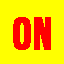
<style>
.page{position:relative;width:64px;height:64px;background:#ffff00}
.page>*{position:absolute;margin:0}
.t1{font:44.9px "BebasNeue-Regular";color:#ff0000;font-weight:bold}
</style>
<div class="page">
<p class="t1" style="left:13px;top:17px;width:38px;height:33px">ON</p>
</div>
